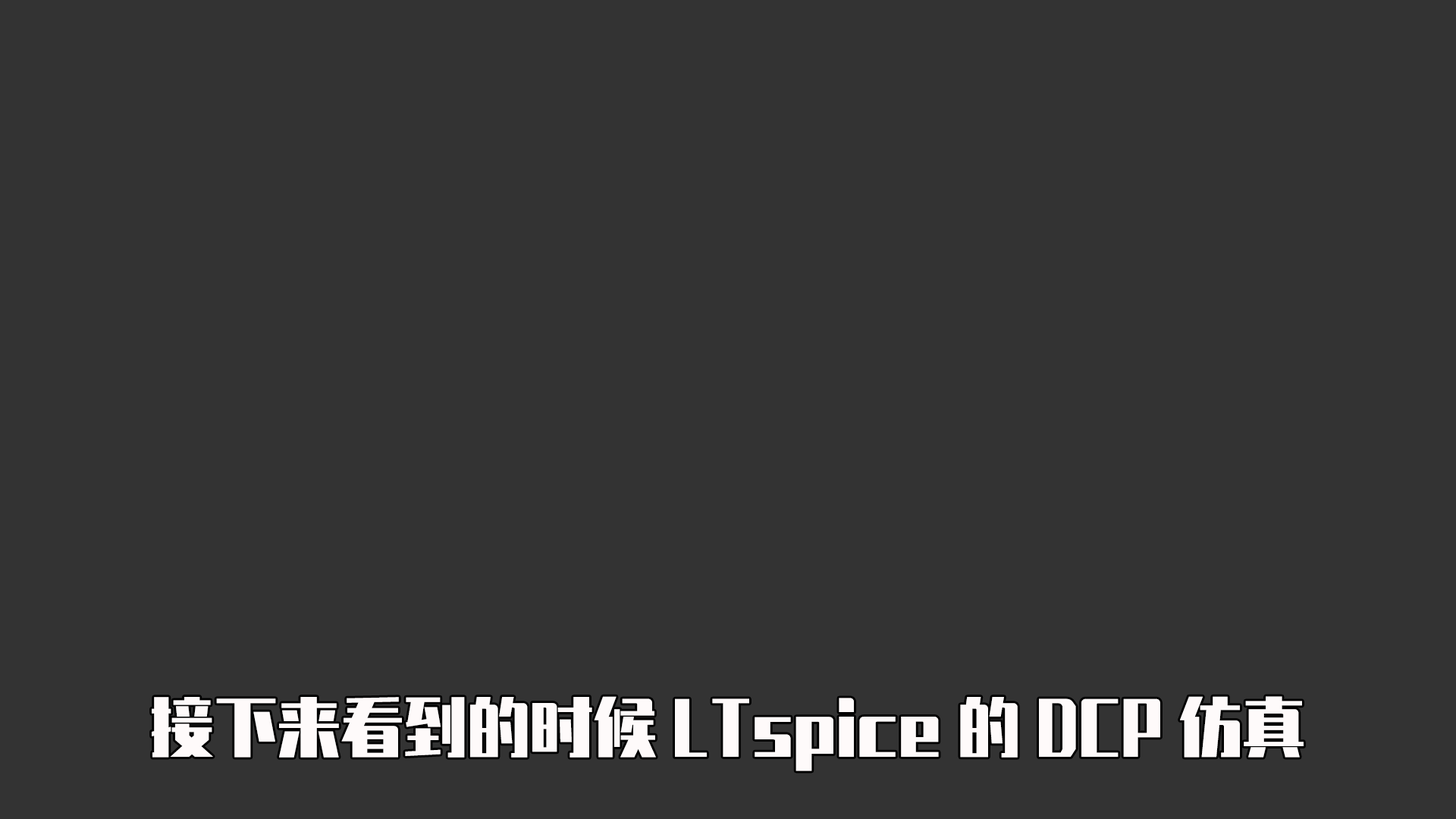
<style>
.page{position:relative;width:1456px;height:819px;background:#333333}
.page>*{position:absolute;margin:0}
.t1{font:63.2px "ZhenyanGB-Regular";color:#fefafa}
</style>
<div class="page">
<p class="t1" style="left:152px;top:696px;width:1152px;height:75px">接下来看到的时候LTspice的DCP仿真</p>
</div>
